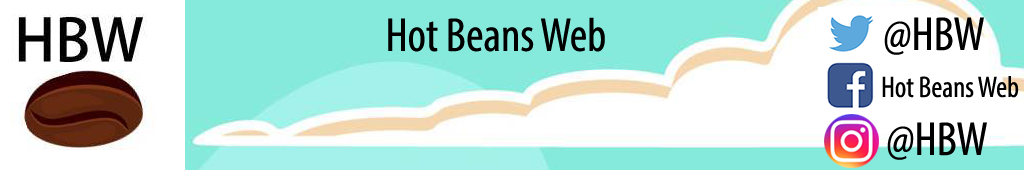
<style>
.page{position:relative;width:1024px;height:170px;background:#ffffff}
.page>*{position:absolute;margin:0}
.t1{font:48px "MyriadPro-Cond";color:#000000}
.t2{font:30px "MyriadPro-Cond";color:#000000}
</style>
<div class="page">
<p class="t1" style="left:388px;top:17px;width:217px;height:35px">Hot Beans Web</p>
<p class="t1" style="left:884px;top:17px;width:100px;height:38px">@HBW</p>
<p class="t2" style="left:882px;top:76px;width:137px;height:22px">Hot Beans Web</p>
<p class="t1" style="left:887px;top:122px;width:100px;height:38px">@HBW</p>
</div>
